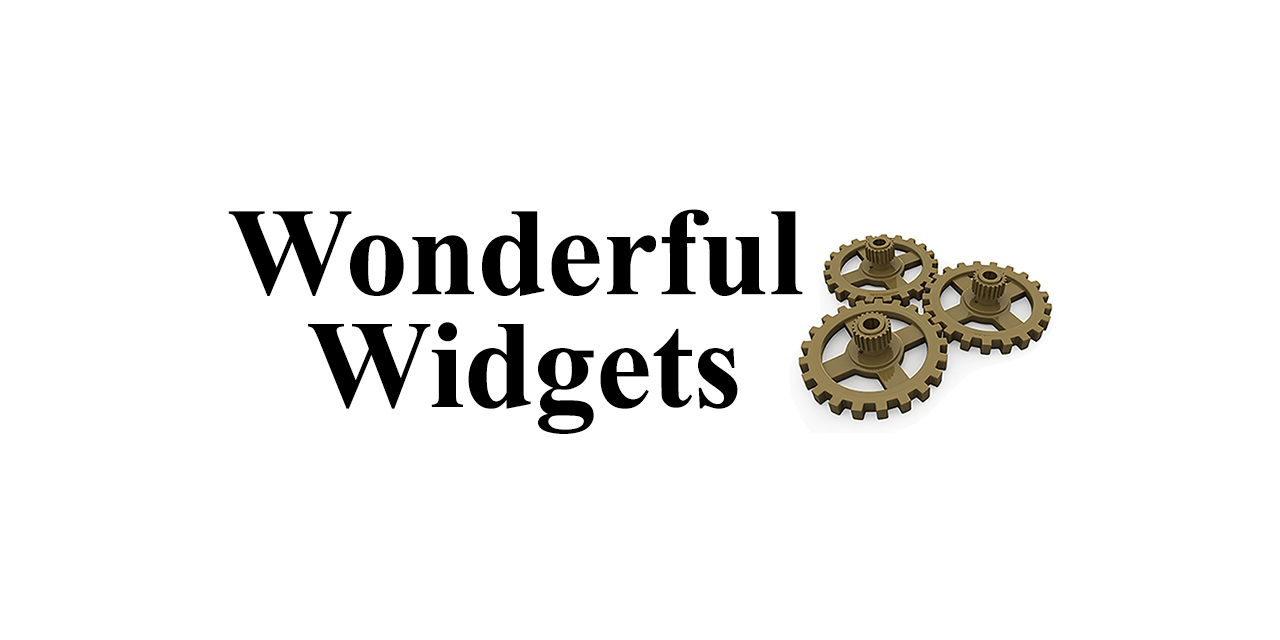
<style>
.page{position:relative;width:1280px;height:640px;background:#ffffff}
.page>*{position:absolute;margin:0}
.t1{font:125px "TimesNewRomanPS-BoldMT";color:#000000}
</style>
<div class="page">
<p class="t1" style="left:228px;top:209px;width:575px;height:87px">Wonderful</p>
<p class="t1" style="left:308px;top:322px;width:430px;height:112px">Widgets</p>
</div>
